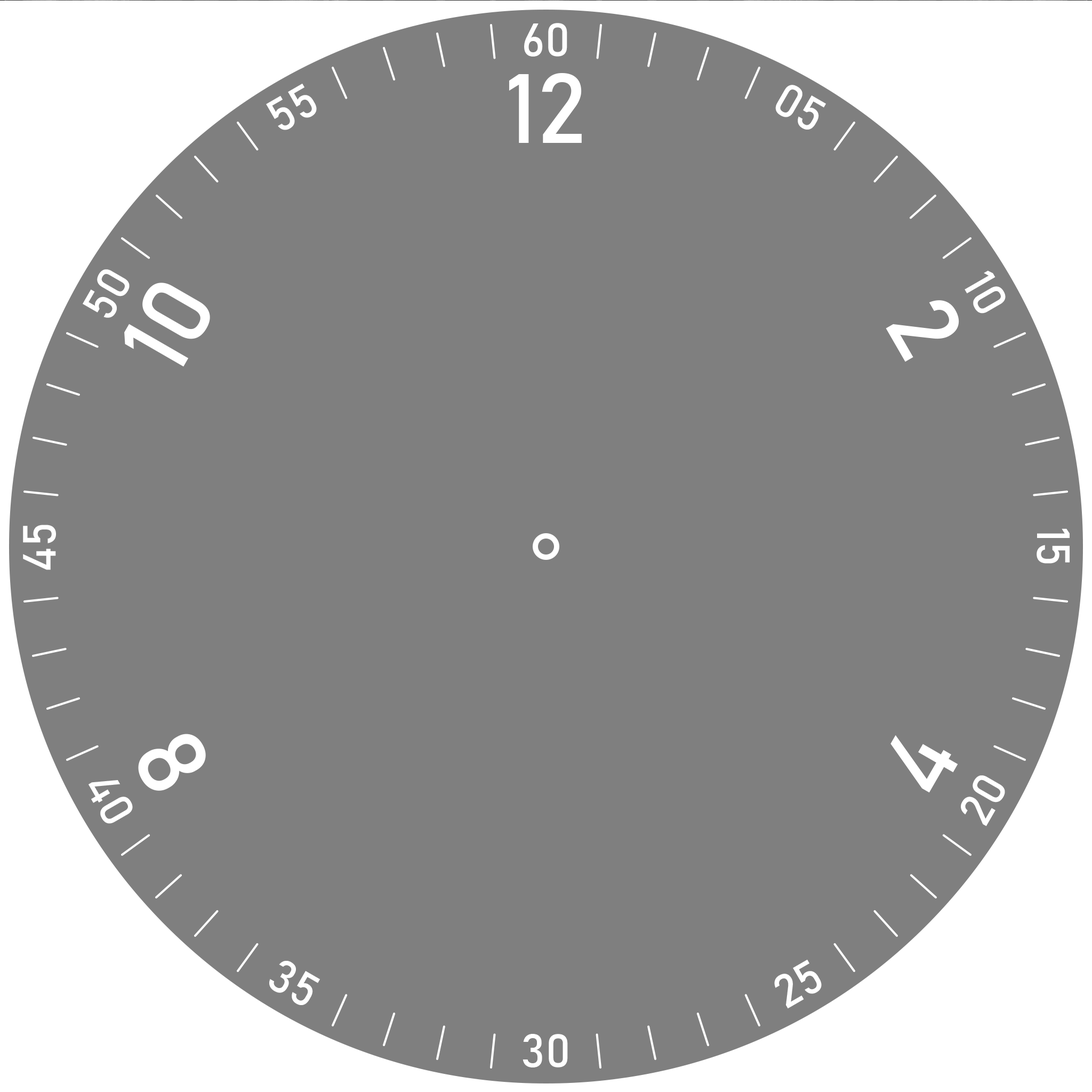
<style>
.page{position:relative;width:1092px;height:1092px;background:#7f7f7f}
.page>*{position:absolute;margin:0}
.t1{font:45.9px "Bahnschrift";color:#ffffff}
.t2{font:96.3px "Bahnschrift";color:#ffffff}
</style>
<div class="page">
<p class="t1" style="left:524px;top:22px;width:43px;height:34px">60</p>
<p class="t2" style="left:509px;top:73px;width:73px;height:69px">12</p>
<p class="t1" style="left:266px;top:83px;width:51px;height:47px;rotate:-30deg">55</p>
<p class="t1" style="left:775px;top:84px;width:51px;height:45px;rotate:30deg">05</p>
<p class="t1" style="left:83px;top:269px;width:47px;height:48px;rotate:-60deg">50</p>
<p class="t1" style="left:965px;top:270px;width:41px;height:43px;rotate:60deg">10</p>
<p class="t2" style="left:124px;top:282px;width:86px;height:84px;rotate:-60deg">10</p>
<p class="t2" style="left:886px;top:300px;width:73px;height:62px;rotate:60deg">2</p>
<p class="t1" style="left:23px;top:524px;width:33px;height:45px;rotate:-90deg">45</p>
<p class="t1" style="left:1037px;top:528px;width:33px;height:35px;rotate:90deg">15</p>
<p class="t2" style="left:138px;top:733px;width:68px;height:57px;rotate:60deg">8</p>
<p class="t2" style="left:890px;top:734px;width:68px;height:58px;rotate:-60deg">4</p>
<p class="t1" style="left:89px;top:780px;width:44px;height:43px;rotate:60deg">40</p>
<p class="t1" style="left:961px;top:775px;width:44px;height:51px;rotate:-60deg">20</p>
<p class="t1" style="left:269px;top:960px;width:51px;height:45px;rotate:30deg">35</p>
<p class="t1" style="left:774px;top:959px;width:48px;height:49px;rotate:-30deg">25</p>
<p class="t1" style="left:523px;top:1033px;width:45px;height:34px">30</p>
</div>
